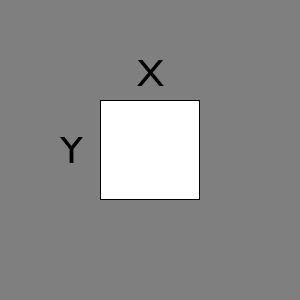
<style>
.page{position:relative;width:300px;height:300px;background:#7f7f7f}
.page>*{position:absolute;margin:0}
.t1{font:38px "GillSansMT";color:#000000}
</style>
<div class="page">
<p class="t1" style="left:137px;top:60px;width:27px;height:26px">X</p>
<p class="t1" style="left:60px;top:137px;width:23px;height:26px">Y</p>
</div>
